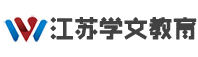
<style>
.page{position:relative;width:198px;height:57px;background:#ffffff}
.page>*{position:absolute;margin:0}
.t1{font:24px "MFShangHei_Noncommercial-Bold";color:#424242;font-weight:bold}
</style>
<div class="page">
<p class="t1" style="left:50px;top:17px;width:147px;height:23px">江苏学文教育</p>
</div>
